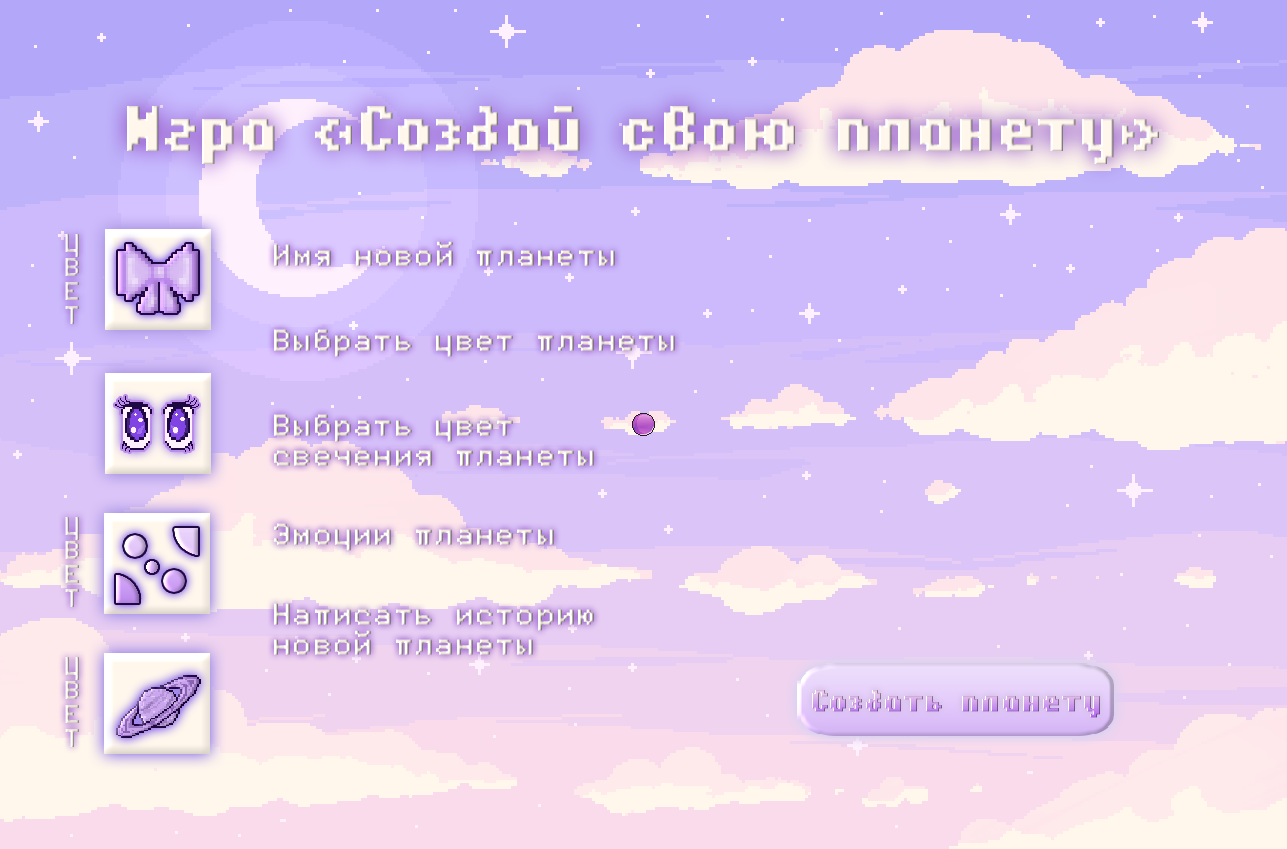
<style>
.page{position:relative;width:1287px;height:849px}
.page>*{position:absolute;margin:0}
.t1{font:64.3px "Hardpixel";letter-spacing:0.05em;color:#ffffff}
.t2{font:30px/24px "Fifaks1.0dev1";letter-spacing:0.05em;font-weight:bold}
.t3{font:35.2px "Fifaks1.0dev1";letter-spacing:0.05em;font-weight:bold}
.t4{font:35.2px/30px "Fifaks1.0dev1";letter-spacing:0.05em;font-weight:bold}
.t5{font:30px "Hardpixel";letter-spacing:0.05em;font-weight:bold}
</style>
<div class="page">
<p class="t1" style="left:127px;top:106px;width:1032px;height:58px">Игра «Создай свою планету»</p>
<p class="t2" style="left:65px;top:234px;width:14px;height:90px">Ц<br>В<br>Е<br>Т</p>
<p class="t3" style="left:274px;top:241px;width:341px;height:25px">Имя новой планеты</p>
<p class="t3" style="left:274px;top:329px;width:401px;height:28px">Выбрать цвет планеты</p>
<p class="t4" style="left:274px;top:414px;width:320px;height:52px">Выбрать цвет<br>свечения планеты</p>
<p class="t2" style="left:65px;top:517px;width:14px;height:90px">Ц<br>В<br>Е<br>Т</p>
<p class="t4" style="left:274px;top:603px;width:320px;height:52px">Написать историю<br>новой планеты</p>
<p class="t2" style="left:65px;top:657px;width:14px;height:90px">Ц<br>В<br>Е<br>Т</p>
<p class="t5" style="left:812px;top:690px;width:288px;height:28px">Создать планету</p>
</div>
